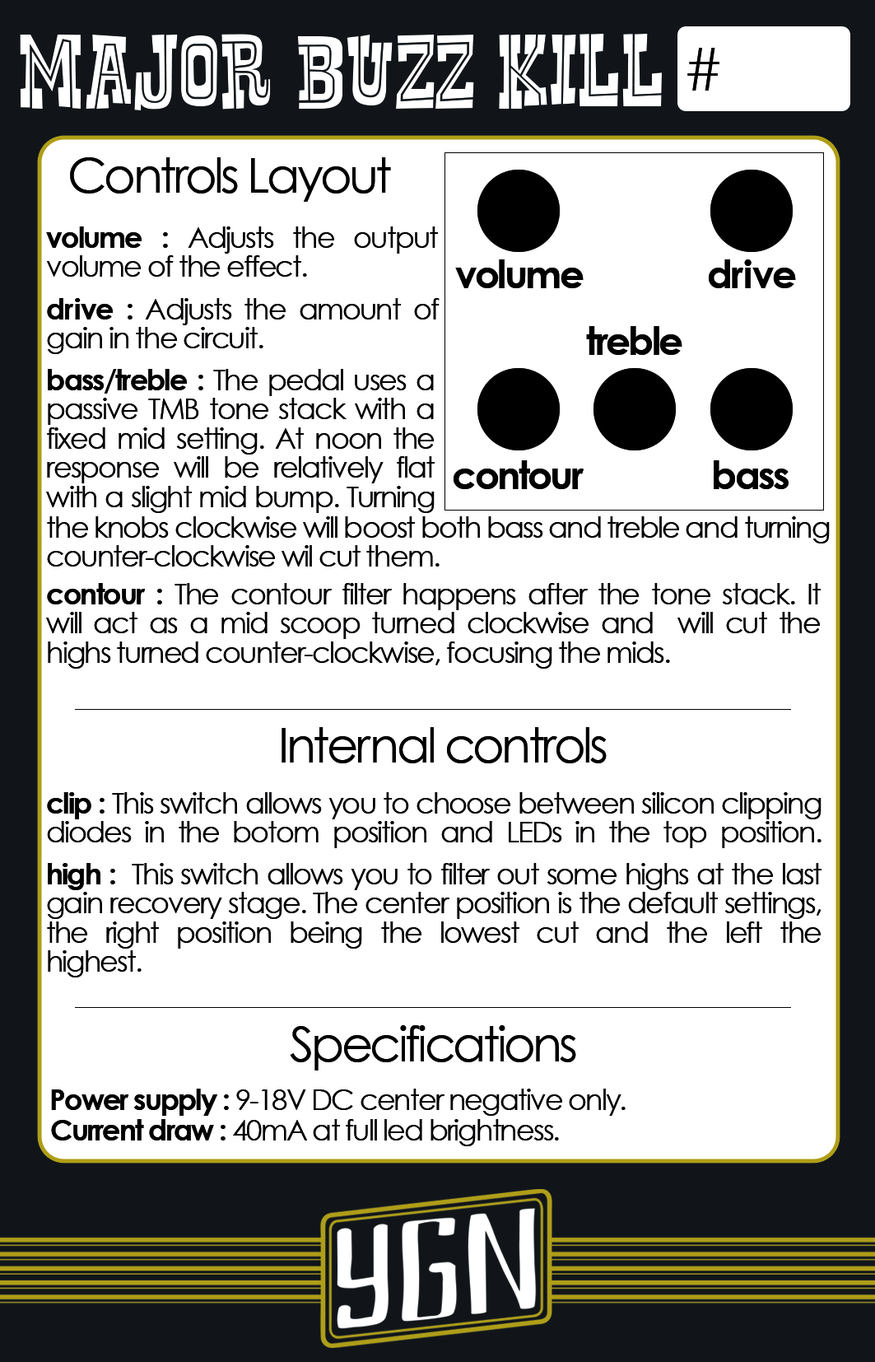
<style>
.page{position:relative;width:875px;height:1362px;background:#ffffff}
.page>*{position:absolute;margin:0}
.t1{font:102.1px "RustlerFancy";letter-spacing:0.02em;color:#ffffff}
.t2{font:58.4px "CenturyGothic";color:#000000}
.t3{font:48.6px "CenturyGothic";letter-spacing:-0.06em;color:#000000}
.t4{font:29.2px/29.2px "CenturyGothic";letter-spacing:-0.06em;color:#000000}
.t5{font:29.2px/29.2px "CenturyGothic-Bold";letter-spacing:-0.06em;color:#000000}
.t6{font:38.9px "CenturyGothic-Bold";letter-spacing:-0.06em;color:#000000}
.t7{font:38.9px "CenturyGothic-Bold";color:#000000}
.t8{font:29.2px/29.2px "CenturyGothic-Bold";letter-spacing:0.02em;color:#000000}
.t9{font:29.2px/29.2px "CenturyGothic-Bold";color:#000000}
.t10{font:48.6px "CenturyGothic";color:#000000}
.t11{font:29.2px "CenturyGothic";letter-spacing:-0.06em;color:#000000}
.t12{font:29.2px "CenturyGothic-Bold";letter-spacing:-0.06em;color:#000000}
</style>
<div class="page">
<p class="t1" style="left:20px;top:34px;width:642px;height:76px">Major BUZZ KILL</p>
<p class="t2" style="left:688px;top:48px;width:32px;height:43px">#</p>
<p class="t3" style="left:70px;top:157px;width:321px;height:45px">Controls Layout</p>
<p class="t4" style="left:46px;top:226px;width:392px;height:51px;text-align:justify"><span class="t5">volume : </span>Adjusts the output<br>volume of the effect.</p>
<p class="t6" style="left:455px;top:259px;width:129px;height:29px">volume</p>
<p class="t7" style="left:709px;top:259px;width:87px;height:29px"><span class="t6">d</span>ri<span class="t6">ve</span></p>
<p class="t4" style="left:47px;top:298px;width:393px;height:56px;text-align:justify"><span class="t5">d</span><span class="t8">r</span><span class="t9">i</span><span class="t5">ve :</span> Adjusts the amount of<br>gain in the circuit.</p>
<p class="t6" style="left:586px;top:326px;width:97px;height:29px">treble</p>
<p class="t4" style="left:46px;top:369px;width:389px;height:144px;text-align:justify"><span class="t5">bass/treble : </span>The pedal uses a<br>passive TMB tone stack with a<br>fixed mid setting. At noon the<br>response will be relatively flat with a slight mid bump. Turning</p>
<p class="t6" style="left:454px;top:460px;width:130px;height:29px">contour</p>
<p class="t6" style="left:714px;top:460px;width:75px;height:29px">bass</p>
<p class="t4" style="left:47px;top:516px;width:783px;height:51px;text-align:justify">the knobs clockwise will boost both bass and treble and turning<br>counter-clockwise wil cut them.</p>
<p class="t4" style="left:46px;top:583px;width:775px;height:86px;text-align:justify"><span class="t5">contour :</span> The contour filter happens after the tone stack. It<br>will act as a mid scoop turned clockwise and  will cut the<br>highs turned counter-clockwise, focusing the mids.</p>
<p class="t3" style="left:282px;top:727px;width:325px;height:36px">Inte<span class="t10">r</span>nal controls</p>
<p class="t4" style="left:47px;top:792px;width:775px;height:56px;text-align:justify"><span class="t5">clip :</span> This switch allows you to choose between silicon clipping<br>diodes in the botom position and LEDs in the top position.</p>
<p class="t4" style="left:47px;top:863px;width:775px;height:115px;text-align:justify"><span class="t5">high :</span>  This switch allows you to filter out some highs at the last<br>gain recovery stage. The center position is the default settings, the right position being the lowest cut and the left the<br>highest.</p>
<p class="t3" style="left:290px;top:1025px;width:286px;height:46px">Specifications</p>
<p class="t11" style="left:51px;top:1089px;width:575px;height:27px"><span class="t12">Power supply : </span>9-18V DC center negative only.</p>
<p class="t11" style="left:51px;top:1119px;width:508px;height:27px"><span class="t12">Current draw : </span>40mA at full led brightness.</p>
</div>
